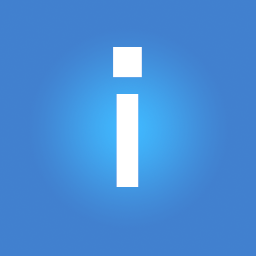
<style>
.page{position:relative;width:256px;height:256px;background:#4180cf}
.page>*{position:absolute;margin:0}
.t1{font:279.8px "CubicSub";letter-spacing:-0.015em;color:#ffffff}
</style>
<div class="page">
<p class="t1" style="left:113px;top:47px;width:29px;height:140px">i</p>
</div>
